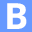
<style>
.page{position:relative;width:32px;height:32px;background:#6699ff}
.page>*{position:absolute;margin:0}
.t1{font:36px "OpenSans-Bold";color:#ffffff}
</style>
<div class="page">
<p class="t1" style="left:7px;top:3px;width:20px;height:26px">B</p>
</div>
